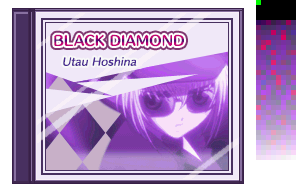
<style>
.page{position:relative;width:296px;height:192px}
.page>*{position:absolute;margin:0}
.t1{font:13px "HummingStd-B";letter-spacing:0.02em;color:#b10574}
.t2{font:10px "HummingStd-D";letter-spacing:0.02em;color:#482890;font-style:italic}
</style>
<div class="page">
<p class="t1" style="left:54px;top:34px;width:130px;height:13px">BLACK DIAMOND</p>
<p class="t2" style="left:63px;top:56px;width:74px;height:10px">Utau Hoshina</p>
</div>
